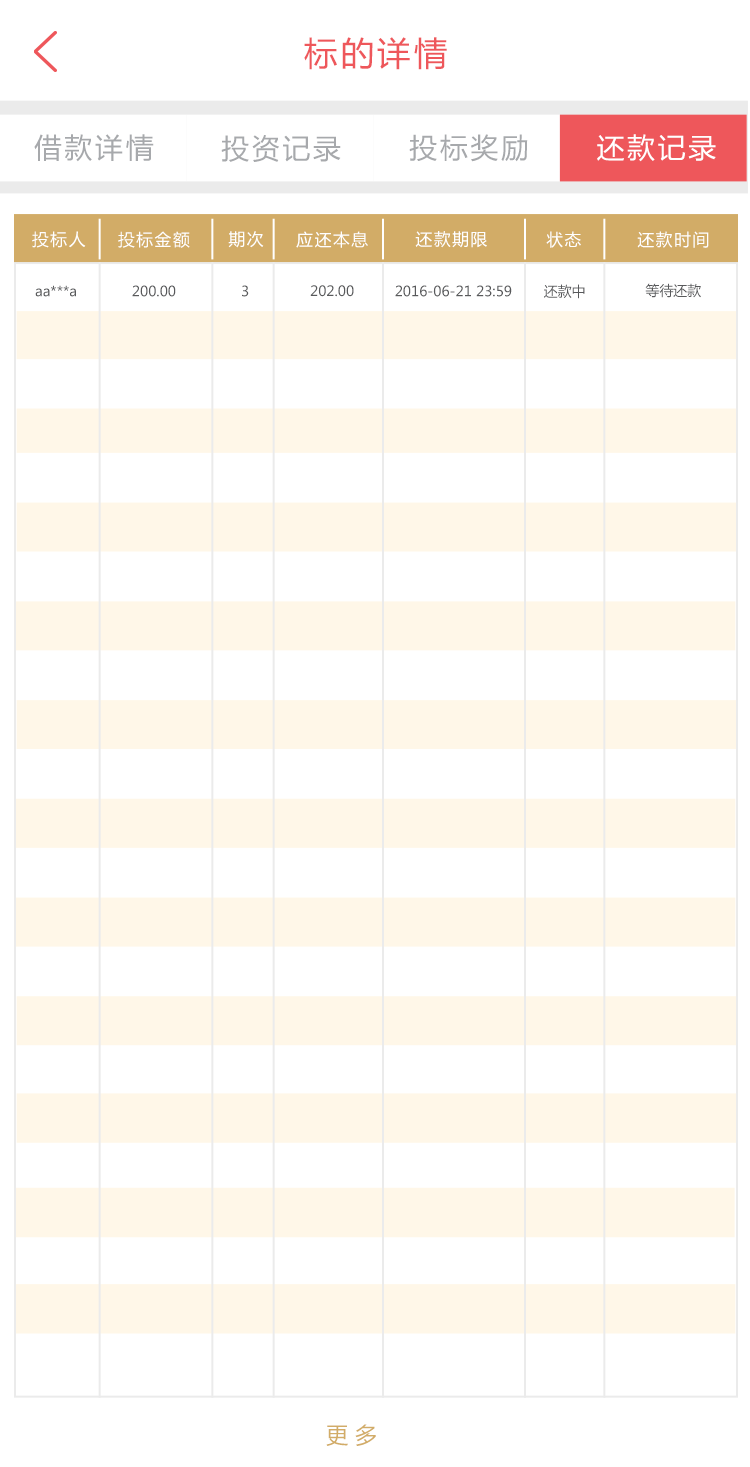
<style>
.page{position:relative;width:750px;height:1467px;background:#ffffff}
.page>*{position:absolute;margin:0}
.t1{font:33.3px "MicrosoftYaHei";letter-spacing:0.1em;color:#ee575b}
.t2{font:27.8px "MicrosoftYaHei";letter-spacing:0.1em;color:#a7a9ac}
.t3{font:27.8px "MicrosoftYaHei";letter-spacing:0.1em;color:#ffffff}
.t4{font:16.7px "MicrosoftYaHei";letter-spacing:0.1em;color:#ffffff}
.t5{font:13.9px "MicrosoftYaHei";color:#58595b}
.t6{font:13.9px "MicrosoftYaHei";letter-spacing:0.1em;color:#58595b}
.t7{font:22.2px "MicrosoftYaHei";color:#d2ac67}
</style>
<div class="page">
<p class="t1" style="left:304px;top:37px;width:143px;height:33px">标的详情</p>
<p class="t2" style="left:34px;top:134px;width:120px;height:28px">借款详情</p>
<p class="t2" style="left:221px;top:135px;width:120px;height:27px">投资记录</p>
<p class="t2" style="left:409px;top:134px;width:119px;height:28px">投标奖励</p>
<p class="t3" style="left:597px;top:134px;width:119px;height:28px">还款记录</p>
<p class="t4" style="left:32px;top:231px;width:54px;height:17px">投标人</p>
<p class="t4" style="left:118px;top:231px;width:72px;height:17px">投标金额</p>
<p class="t4" style="left:228px;top:231px;width:36px;height:17px">期次</p>
<p class="t4" style="left:296px;top:231px;width:72px;height:17px">应还本息</p>
<p class="t4" style="left:415px;top:231px;width:72px;height:17px">还款期限</p>
<p class="t4" style="left:546px;top:231px;width:35px;height:17px">状态</p>
<p class="t4" style="left:637px;top:231px;width:72px;height:17px">还款时间</p>
<p class="t5" style="left:35px;top:285px;width:41px;height:12px">aa***a</p>
<p class="t5" style="left:132px;top:285px;width:44px;height:12px">200.00</p>
<p class="t6" style="left:242px;top:285px;width:7px;height:12px">3</p>
<p class="t5" style="left:310px;top:285px;width:44px;height:12px">202.00</p>
<p class="t5" style="left:395px;top:285px;width:117px;height:12px">2016-06-21 23:59</p>
<p class="t5" style="left:544px;top:284px;width:41px;height:15px">还款中</p>
<p class="t5" style="left:645px;top:283px;width:56px;height:15px">等待还款</p>
<p class="t7" style="left:326px;top:1424px;width:50px;height:22px">更 多</p>
</div>
